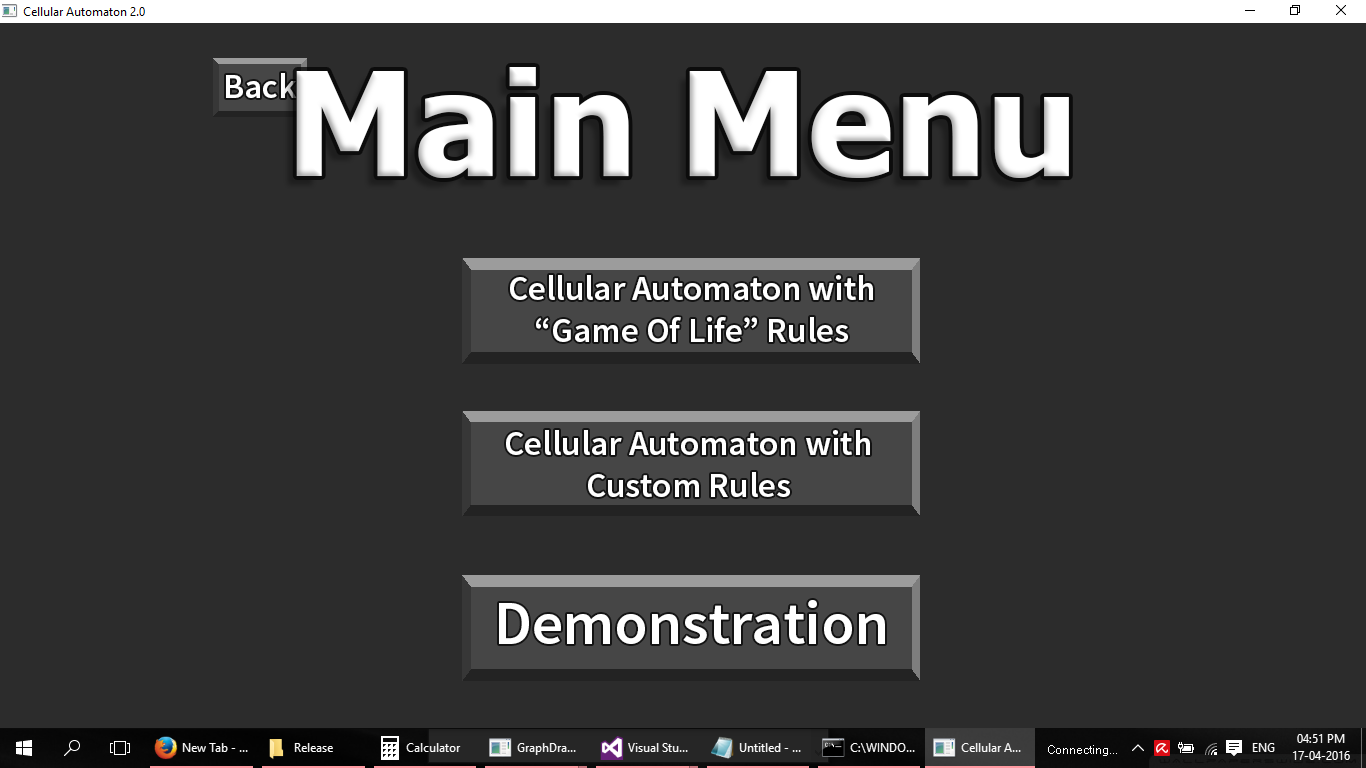
<style>
.page{position:relative;width:1366px;height:768px;background:#2c2c2c}
.page>*{position:absolute;margin:0}
.t1{font:35px "SourceSansPro-Semibold";color:#ffffff}
.t2{font:144.2px "Tahoma-Bold";color:#ffffff}
.t3{font:61px "SourceSansPro-Semibold";color:#ffffff}
</style>
<div class="page">
<p class="t1" style="left:226px;top:73px;width:71px;height:25px">Back</p>
<p class="t2" style="left:296px;top:67px;width:773px;height:111px">Main Menu</p>
<p class="t1" style="left:510px;top:275px;width:363px;height:67px;text-align:center">Cellular Automaton with<br>“Game Of Life” Rules</p>
<p class="t1" style="left:506px;top:430px;width:364px;height:67px;text-align:center">Cellular Automaton with<br>Custom Rules</p>
<p class="t3" style="left:499px;top:600px;width:386px;height:44px">Demonstration</p>
</div>
